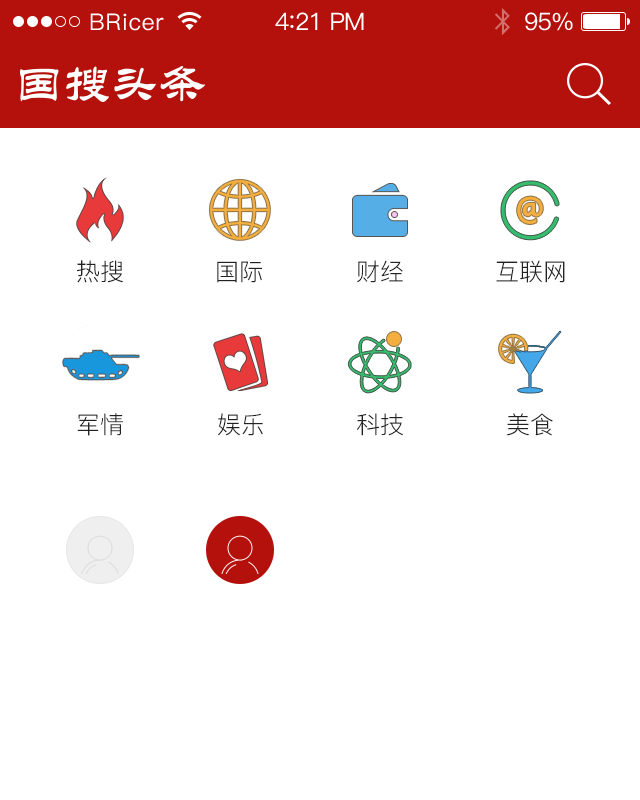
<style>
.page{position:relative;width:640px;height:800px;background:#ffffff}
.page>*{position:absolute;margin:0}
.t1{font:23px "PingFang-SC-Medium";letter-spacing:0.02em;color:#ffffff}
.t2{font:24px "PingFang-SC-Medium";letter-spacing:-0.02em;color:#ffffff}
.t3{font:26px "PingFang-SC-Medium";letter-spacing:-0.02em;color:#ffffff}
.t4{font:24px "PingFang-SC-Regular";color:#222222}
</style>
<div class="page">
<p class="t1" style="left:90px;top:13px;width:74px;height:18px">BRicer</p>
<p class="t2" style="left:275px;top:12px;width:89px;height:18px">4<span class="t3">:</span>21 PM</p>
<p class="t2" style="left:525px;top:12px;width:48px;height:19px">95%</p>
<p class="t4" style="left:77px;top:260px;width:46px;height:23px">热搜</p>
<p class="t4" style="left:217px;top:261px;width:45px;height:22px">国际</p>
<p class="t4" style="left:357px;top:260px;width:46px;height:23px">财经</p>
<p class="t4" style="left:496px;top:260px;width:69px;height:23px">互联网</p>
<p class="t4" style="left:77px;top:413px;width:46px;height:23px">军情</p>
<p class="t4" style="left:218px;top:413px;width:45px;height:23px">娱乐</p>
<p class="t4" style="left:357px;top:413px;width:46px;height:23px">科技</p>
<p class="t4" style="left:507px;top:413px;width:46px;height:23px">美食</p>
</div>
